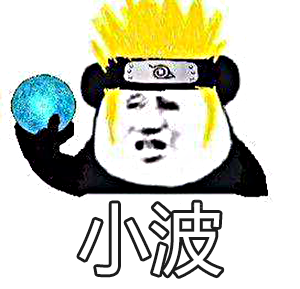
<style>
.page{position:relative;width:300px;height:289px;background:#ffffff}
.page>*{position:absolute;margin:0}
.t1{font:75.6px "MicrosoftYaHei";color:#ffffff;scale:0.95 1}
</style>
<div class="page">
<p class="t1" style="left:79px;top:202px;width:143px;height:74px">小波</p>
</div>
